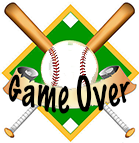
<style>
.page{position:relative;width:139px;height:143px;background:#ffffff}
.page>*{position:absolute;margin:0}
.t1{font:29.2px "MarkerFelt-Thin";color:#000000}
</style>
<div class="page">
<p class="t1" style="left:8px;top:74px;width:122px;height:40px">Game Over</p>
</div>
